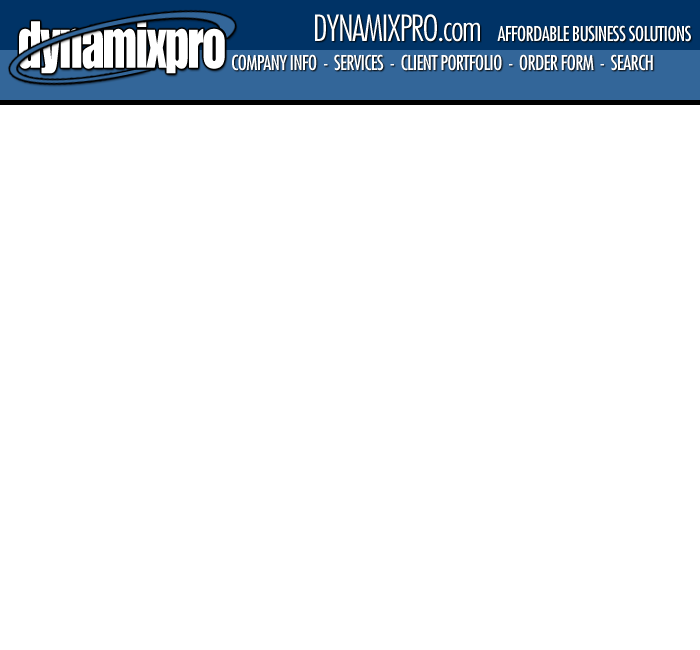
<style>
.page{position:relative;width:700px;height:650px;background:#ffffff}
.page>*{position:absolute;margin:0}
.t1{font:20px "Futura-Condensed";letter-spacing:-0.04em;color:#ffffff}
.t2{font:35px "Futura-CondensedLight";letter-spacing:-0.04em;color:#ffffff}
.t3{font:65px "Impact";letter-spacing:-0.02em;color:#ffffff;scale:0.77 1}
</style>
<div class="page">
<p class="t1" style="left:315px;top:14px;width:376px;height:28px"><span class="t2">DYNAMIXPRO.com  </span>AFFORDABLE BUSINESS SOLUTIONS</p>
<p class="t3" style="left:19px;top:21px;width:206px;height:53px">dynamixpro</p>
<p class="t1" style="left:232px;top:54px;width:421px;height:17px">COMPANY INFO  -  SERVICES  -  CLIENT PORTFOLIO  -  ORDER FORM  -  SEARCH</p>
</div>
